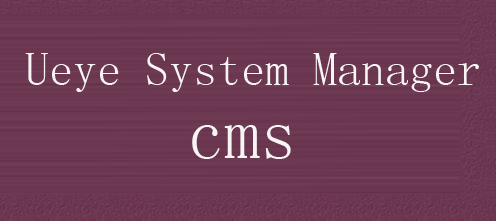
<style>
.page{position:relative;width:496px;height:221px}
.page>*{position:absolute;margin:0}
.t1{font:48px "SimSun";color:#f7f4f4}
.t2{font:72px "SimSun";color:#f7f4f4}
</style>
<div class="page">
<p class="t1" style="left:25px;top:53px;width:454px;height:39px">Ueye System Manager</p>
<p class="t2" style="left:192px;top:125px;width:99px;height:34px">cms</p>
</div>
